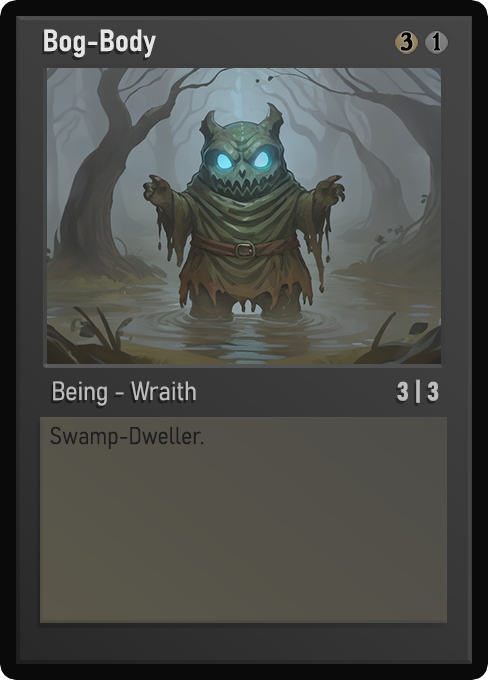
<style>
.page{position:relative;width:488px;height:680px}
.page>*{position:absolute;margin:0}
.t1{font:30px "Bahnschrift-SemiBoldSemiCondensed";color:#f2f2f2;font-weight:bold}
.t2{font:25px "WTRRoycroft";color:#000000;font-weight:bold;scale:1.09 1}
.t3{font:26px "Bahnschrift-LightSemiCondensed";color:#c8c8c8;font-weight:bold}
.t4{font:26px "Bahnschrift-BoldSemiCondensed";color:#bdbdbd;font-weight:bold}
.t5{font:24px "Bahnschrift-LightSemiCondensed";color:#1e1e1e;font-weight:bold}
</style>
<div class="page">
<p class="t1" style="left:44px;top:29px;width:112px;height:29px;opacity:0.9">Bog-Body</p>
<p class="t2" style="left:400px;top:32px;width:13px;height:19px">3</p>
<p class="t2" style="left:432px;top:32px;width:9px;height:19px">1</p>
<p class="t3" style="left:53px;top:381px;width:143px;height:25px;opacity:0.9">Being - Wraith</p>
<p class="t4" style="left:397px;top:379px;width:42px;height:24px">3 | 3</p>
<p class="t5" style="left:50px;top:426px;width:154px;height:23px">Swamp-Dweller.</p>
</div>
